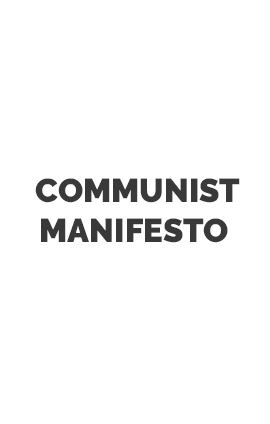
<style>
.page{position:relative;width:270px;height:424px;background:#ffffff}
.page>*{position:absolute;margin:0}
.t1{font:33px "Raleway-Black";color:#393939;text-transform:uppercase}
</style>
<div class="page">
<p class="t1" style="left:35px;top:178px;width:205px;height:65px;text-align:center">communist <br>manifesto</p>
</div>
